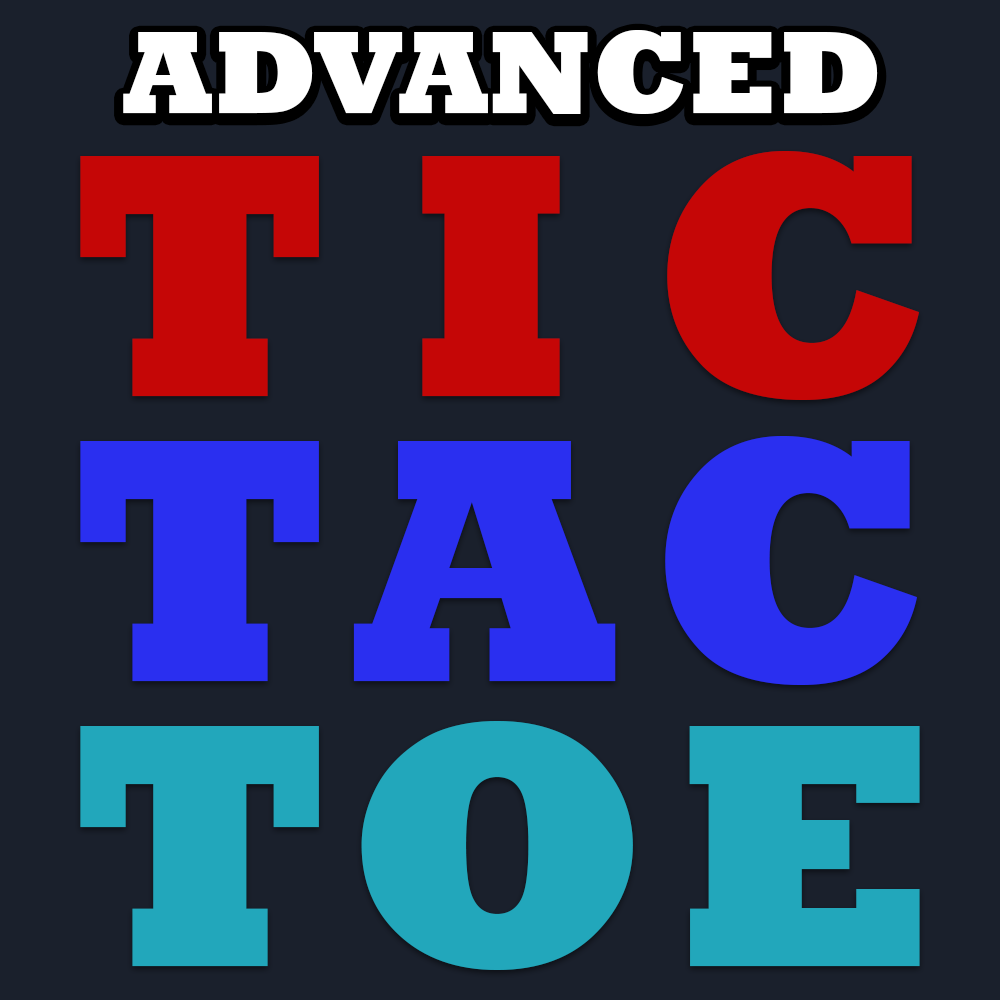
<style>
.page{position:relative;width:1000px;height:1000px;background:#1a202c}
.page>*{position:absolute;margin:0}
.t1{font:120px "Rockwell-ExtraBold";color:#ffffff}
.t2{font:354px/285px "Rockwell-ExtraBold";letter-spacing:0.22em;color:#c50606}
.t3{font:354px/285px "Rockwell-ExtraBold";letter-spacing:0.1em;color:#2a2ff0}
.t4{font:354px/285px "Rockwell-ExtraBold";letter-spacing:0.068em;color:#22a7bb}
</style>
<div class="page">
<p class="t1" style="left:123px;top:30px;width:755px;height:84px">ADVANCED</p>
<p class="t2" style="left:80px;top:151px;width:840px;height:819px">TIC<br><span class="t3">TAC<br></span><span class="t4">TOE</span></p>
</div>
